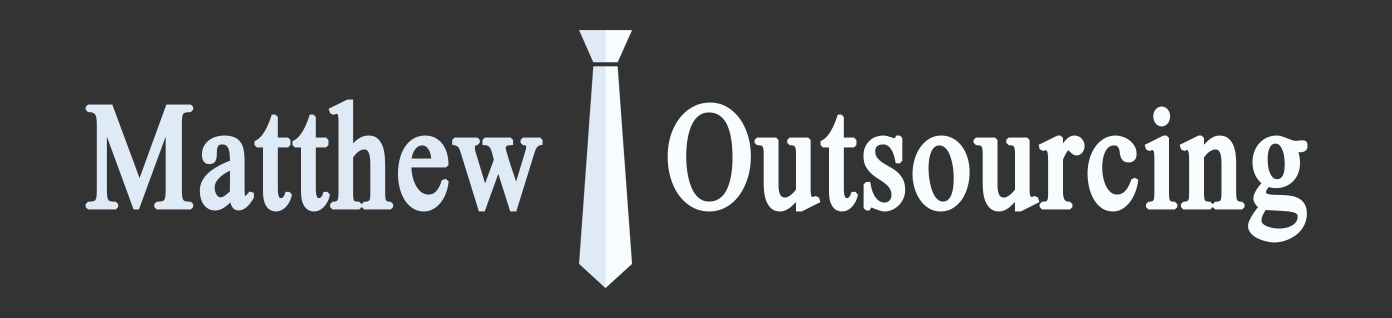
<style>
.page{position:relative;width:1392px;height:318px;background:#333333}
.page>*{position:absolute;margin:0}
.t1{font:200px "Scheherazade-Regular";color:#deeaf6;font-weight:bold;scale:0.8 1}
.t2{font:200px "Scheherazade-Regular";color:#f7fcff;font-weight:bold;scale:0.8 1}
</style>
<div class="page">
<p class="t1" style="left:85px;top:99px;width:458px;height:113px">Matthew</p>
<p class="t2" style="left:667px;top:102px;width:641px;height:141px">Outsourcing</p>
</div>
